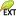
<style>
.page{position:relative;width:16px;height:16px;background:#ffffff}
.page>*{position:absolute;margin:0}
.t1{font:9px "Calibri";color:#000000}
</style>
<div class="page">
<p class="t1" style="left:3px;top:9px;width:14px;height:7px">EXT</p>
</div>
